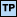
<style>
.page{position:relative;width:17px;height:17px;background:#b7d9f8}
.page>*{position:absolute;margin:0}
.t1{font:10px "Arial-BoldMT";color:#000000}
</style>
<div class="page">
<p class="t1" style="left:2px;top:4px;width:13px;height:8px">TP</p>
</div>
